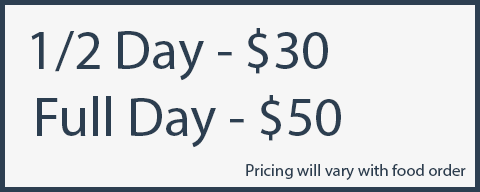
<style>
.page{position:relative;width:480px;height:192px;background:#f6f6f6}
.page>*{position:absolute;margin:0}
.t1{font:55.6px "MyriadPro-Regular";color:#2c3e50}
.t2{font:16.7px "MyriadPro-Regular";color:#2c3e50}
</style>
<div class="page">
<p class="t1" style="left:31px;top:28px;width:297px;height:53px">1/2 Day - $30</p>
<p class="t1" style="left:37px;top:95px;width:304px;height:53px">Full Day - $50</p>
<p class="t2" style="left:246px;top:164px;width:220px;height:16px">Pricing will vary with food order</p>
</div>
